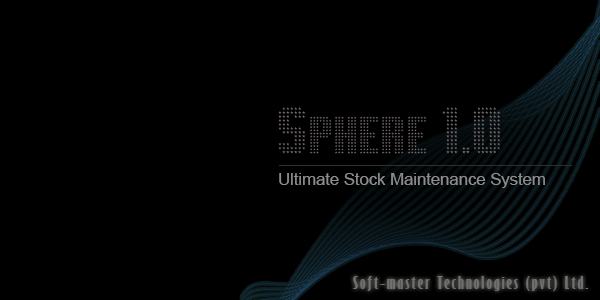
<style>
.page{position:relative;width:600px;height:300px;background:#000000}
.page>*{position:absolute;margin:0}
.t1{font:58.3px "Movie-StarA";color:#797171}
.t2{font:16.7px "ArialMT";color:#8e8d8d}
.t3{font:15.6px "GillSansMT-ExtraCondensedBold";letter-spacing:0.1em;color:#707070;scale:1.33 1}
</style>
<div class="page">
<p class="t1" style="left:278px;top:107px;width:222px;height:47px">Sphere 1.0</p>
<p class="t2" style="left:279px;top:173px;width:266px;height:15px">Ultimate Stock Maintenance System</p>
<p class="t3" style="left:353px;top:275px;width:236px;height:17px">Soft-master Technologies (pvt) Ltd.</p>
</div>
